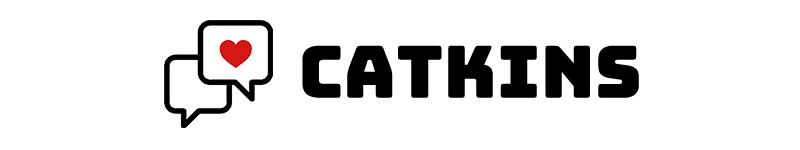
<style>
.page{position:relative;width:800px;height:150px;background:#ffffff}
.page>*{position:absolute;margin:0}
.t1{font:72px "Bungee-Regular";color:#000000}
</style>
<div class="page">
<p class="t1" style="left:302px;top:45px;width:337px;height:53px">Catkins</p>
</div>
